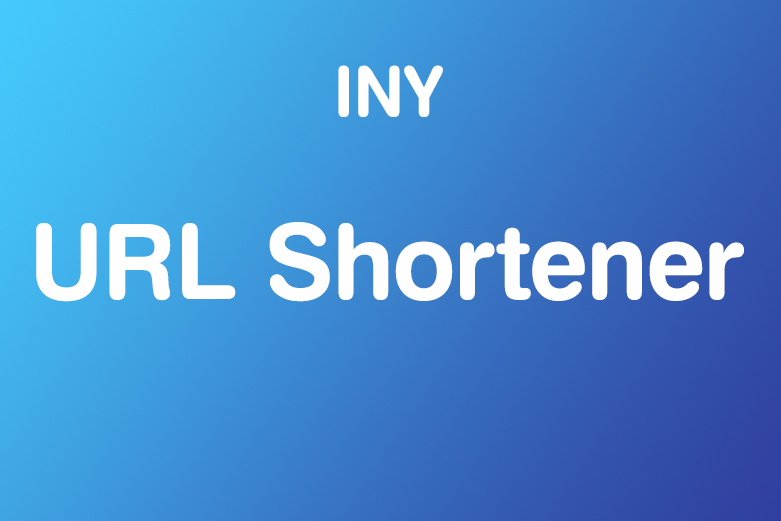
<style>
.page{position:relative;width:781px;height:521px}
.page>*{position:absolute;margin:0}
.t1{font:69.4px "Swis721BdRndBTRusbyme-Bold";color:#fefefe}
.t2{font:104.2px "Swis721BdRndBTRusbyme-Bold";color:#fefefe}
</style>
<div class="page">
<p class="t1" style="left:338px;top:65px;width:105px;height:52px">INY</p>
<p class="t2" style="left:36px;top:222px;width:708px;height:80px">URL Shortener</p>
</div>
